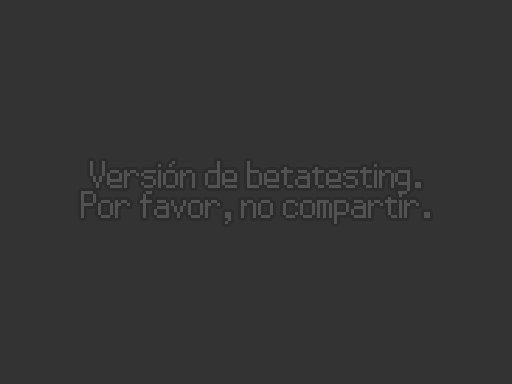
<style>
.page{position:relative;width:512px;height:384px;background:#333333}
.page>*{position:absolute;margin:0}
.t1{font:39px/29.6px "PowerClear-Regular";letter-spacing:-0.025em;color:#525252}
</style>
<div class="page">
<p class="t1" style="left:81px;top:161px;width:349px;height:63px;text-align:center">Versión de betatesting.<br>Por favor, no compartir.</p>
</div>
